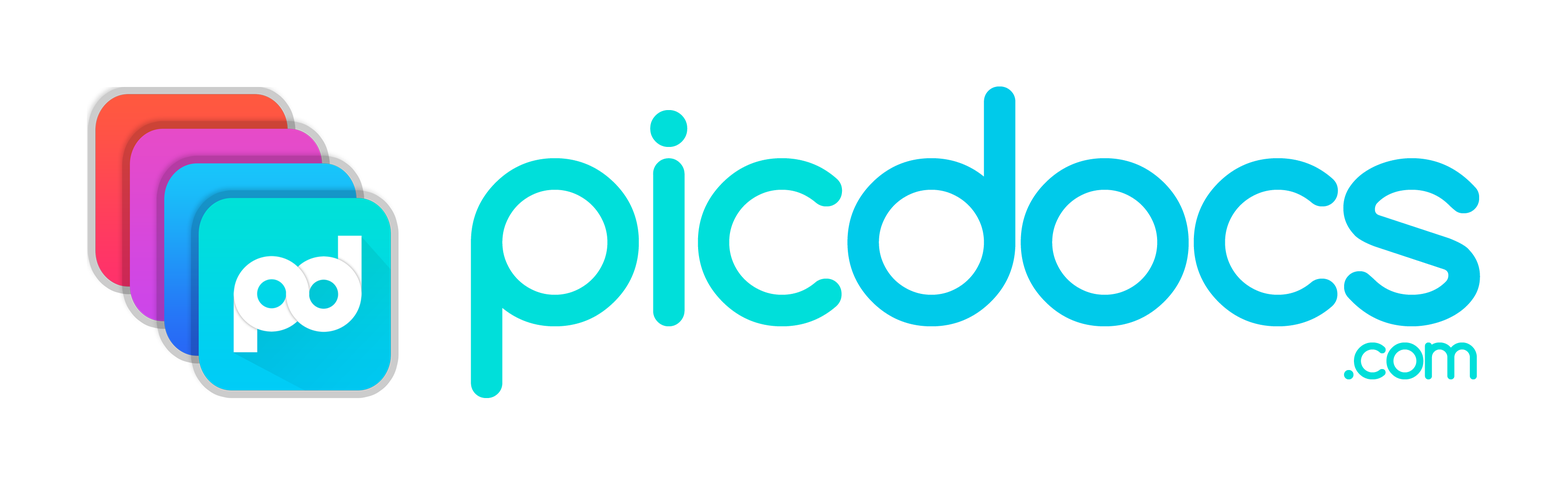
<style>
.page{position:relative;width:1568px;height:486px;background:#ffffff}
.page>*{position:absolute;margin:0}
.t1{font:306.9px "Comfortaa-Bold";letter-spacing:-0.06em;color:#00caea}
.t2{font:306.9px "Comfortaa-Bold";letter-spacing:-0.06em;color:#00dfda}
.t3{font:67.5px "Comfortaa-Bold";letter-spacing:-0.06em;color:#00dfda}
</style>
<div class="page">
<p class="t1" style="left:471px;top:86px;width:1009px;height:312px"><span class="t2">pic</span>docs</p>
<p class="t3" style="left:1344px;top:342px;width:133px;height:37px">.com</p>
</div>
